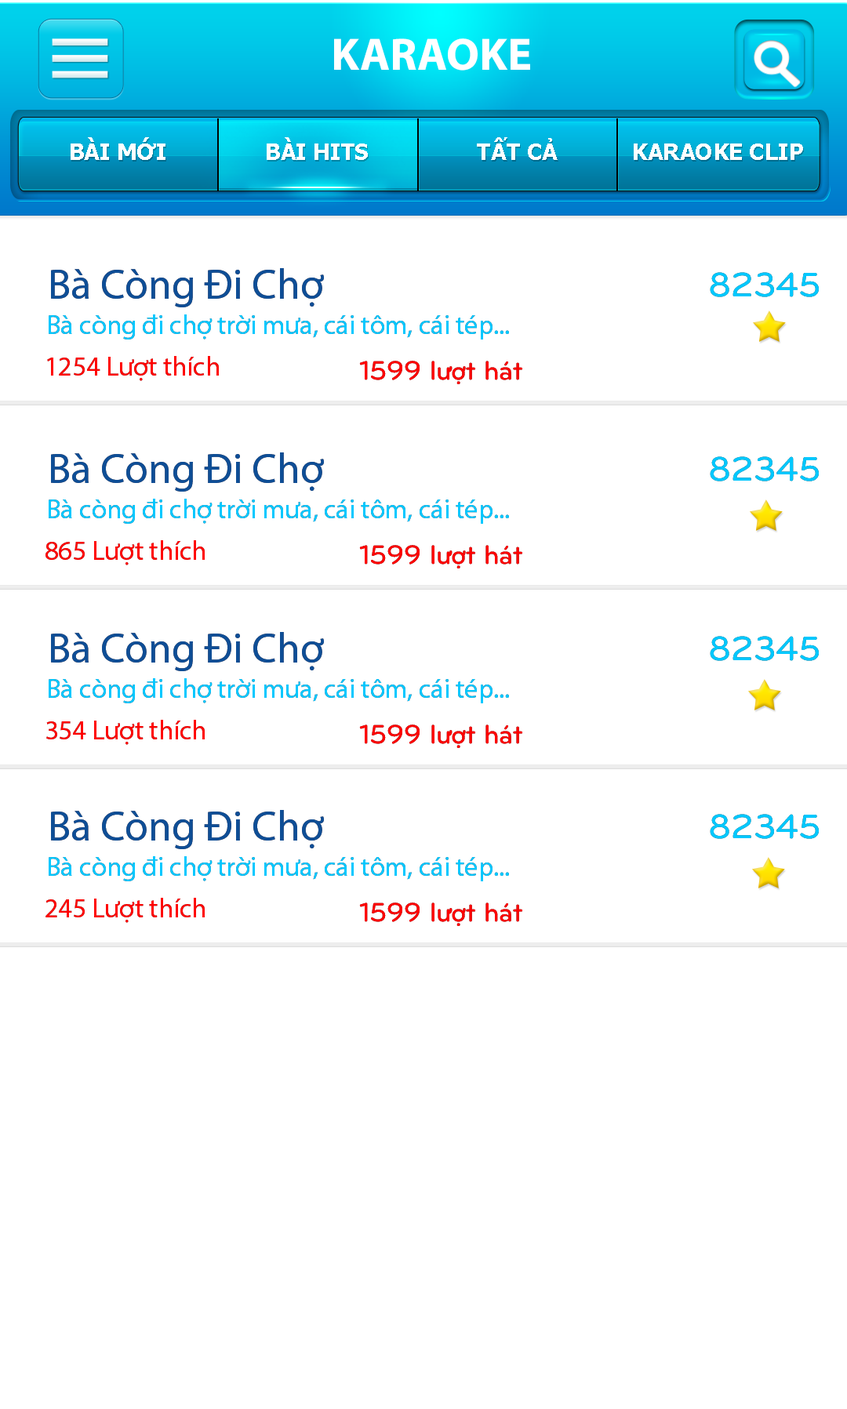
<style>
.page{position:relative;width:847px;height:1409px;background:#ffffff}
.page>*{position:absolute;margin:0}
.t1{font:45.7px "MyriadPro-Bold";color:#ffffff}
.t2{font:22.9px "Tahoma-Bold";letter-spacing:0.02em;color:#ffffff;text-transform:uppercase}
.t3{font:42.5px "MyriadPro-Regular";color:#0e4e96}
.t4{font:42.5px "MyriadPro-Regular";letter-spacing:-0.005em;color:#0e4e96}
.t5{font:35.2px "UTMBryantLGBold";letter-spacing:-0.005em;color:#00c8ff}
.t6{font:27.3px "MyriadPro-Regular";letter-spacing:-0.005em;color:#00c8ff}
.t7{font:27.3px "MyriadPro-Regular";letter-spacing:-0.005em;color:#ff0100}
.t8{font:27.3px "UTMBryantLGBold";letter-spacing:-0.005em;color:#ff0000}
</style>
<div class="page">
<p class="t1" style="left:334px;top:38px;width:196px;height:33px">KARAOKE</p>
<p class="t2" style="left:71px;top:137px;width:94px;height:23px">Bài mới</p>
<p class="t2" style="left:267px;top:137px;width:101px;height:23px">Bài hits</p>
<p class="t2" style="left:477px;top:137px;width:80px;height:23px">Tất cả</p>
<p class="t2" style="left:633px;top:143px;width:170px;height:17px">kARAOKE CLIP</p>
<p class="t3" style="left:51px;top:268px;width:273px;height:39px"><span class="t4">B</span>à Còng Đi Chợ</p>
<p class="t5" style="left:709px;top:272px;width:109px;height:25px">82345</p>
<p class="t6" style="left:49px;top:314px;width:460px;height:25px">Bà còng đi chợ trời mưa, cái tôm, cái tép...</p>
<p class="t7" style="left:47px;top:356px;width:172px;height:25px">1254 Lượt thích</p>
<p class="t8" style="left:359px;top:361px;width:163px;height:23px">1599 lượt hát</p>
<p class="t3" style="left:51px;top:452px;width:273px;height:39px"><span class="t4">B</span>à Còng Đi Chợ</p>
<p class="t5" style="left:709px;top:456px;width:109px;height:25px">82345</p>
<p class="t6" style="left:49px;top:499px;width:460px;height:25px">Bà còng đi chợ trời mưa, cái tôm, cái tép...</p>
<p class="t7" style="left:45px;top:540px;width:160px;height:25px">865 Lượt thích</p>
<p class="t8" style="left:359px;top:545px;width:163px;height:23px">1599 lượt hát</p>
<p class="t3" style="left:51px;top:632px;width:273px;height:39px"><span class="t4">B</span>à Còng Đi Chợ</p>
<p class="t5" style="left:709px;top:636px;width:109px;height:25px">82345</p>
<p class="t6" style="left:49px;top:678px;width:460px;height:25px">Bà còng đi chợ trời mưa, cái tôm, cái tép...</p>
<p class="t7" style="left:46px;top:720px;width:159px;height:25px">354 Lượt thích</p>
<p class="t8" style="left:359px;top:724px;width:163px;height:24px">1599 lượt hát</p>
<p class="t3" style="left:51px;top:810px;width:273px;height:39px"><span class="t4">B</span>à Còng Đi Chợ</p>
<p class="t5" style="left:709px;top:814px;width:109px;height:25px">82345</p>
<p class="t6" style="left:49px;top:856px;width:460px;height:25px">Bà còng đi chợ trời mưa, cái tôm, cái tép...</p>
<p class="t7" style="left:45px;top:898px;width:160px;height:25px">245 Lượt thích</p>
<p class="t8" style="left:359px;top:902px;width:163px;height:24px">1599 lượt hát</p>
</div>
